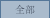
<style>
.page{position:relative;width:50px;height:18px;background:#aabbcc}
.page>*{position:absolute;margin:0}
.t1{font:10px "SimSun"}
</style>
<div class="page">
<p class="t1" style="left:15px;top:4px;width:20px;height:10px">全部</p>
</div>
